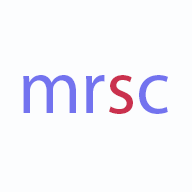
<style>
.page{position:relative;width:192px;height:192px;background:#fcfdfe}
.page>*{position:absolute;margin:0}
.t1{font:76px "MyriadPro-Regular";color:#7373ef}
.t2{font:76px "MyriadPro-Regular";color:#ca314e}
</style>
<div class="page">
<p class="t1" style="left:23px;top:75px;width:145px;height:39px">mr<span class="t2">s</span>c</p>
</div>
